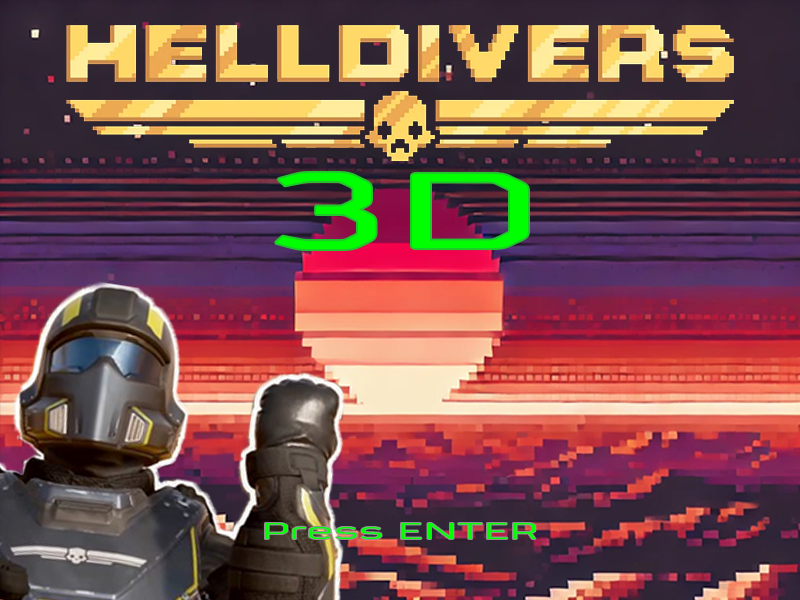
<style>
.page{position:relative;width:800px;height:600px}
.page>*{position:absolute;margin:0}
.t1{font:119.7px "FSSinclair";color:#00ff00;scale:2.07 1}
.t2{font:25px "FSSinclair";color:#00ff00;scale:2.07 1}
</style>
<div class="page">
<p class="t1" style="left:276px;top:172px;width:252px;height:78px">3D</p>
<p class="t2" style="left:265px;top:523px;width:271px;height:16px">Press ENTER</p>
</div>
